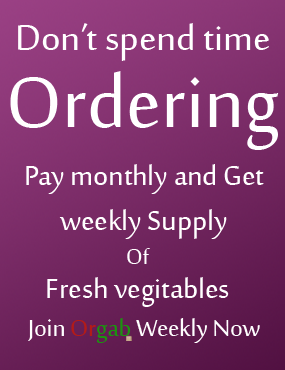
<style>
.page{position:relative;width:285px;height:370px}
.page>*{position:absolute;margin:0}
.t1{font:49px/77.6px "SakkalMajalla";color:#ffffff}
.t2{font:98px/77.6px "SakkalMajalla";color:#ffffff}
.t3{font:37.5px "SakkalMajalla";color:#ffffff}
.t4{font:37.5px/33.3px "SakkalMajalla";color:#ffffff}
.t5{font:29.2px/33.3px "SakkalMajalla";color:#ffffff}
.t6{font:31.5px "SakkalMajalla";color:#ffffff}
.t7{font:31.5px "SakkalMajalla";color:#b31b18}
.t8{font:31.5px "SakkalMajalla";color:#1b950f}
</style>
<div class="page">
<p class="t1" style="left:10px;top:23px;width:269px;height:127px;text-align:center">Don’t spend time<br><span class="t2">Ordering</span></p>
<p class="t3" style="left:26px;top:164px;width:238px;height:75px;text-align:center">Pay monthly and Get<br> weekly Supply</p>
<p class="t4" style="left:47px;top:248px;width:182px;height:59px;text-align:center"><span class="t5">Of<br></span>Fresh vegitables</p>
<p class="t6" style="left:28px;top:318px;width:232px;height:25px">Join <span class="t7">Or</span><span class="t8">gab</span> Weekly Now</p>
</div>
